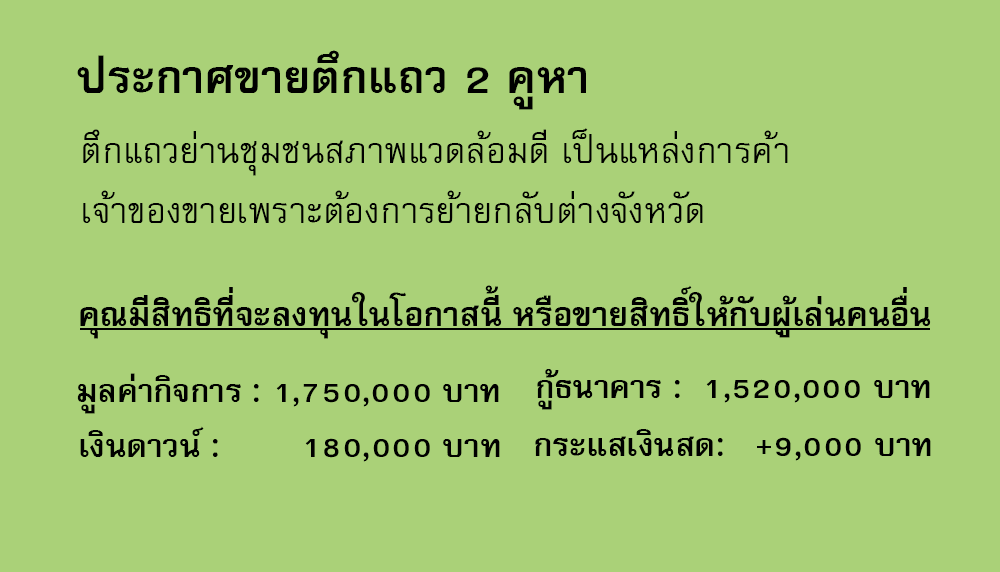
<style>
.page{position:relative;width:1000px;height:572px;background:#aad178}
.page>*{position:absolute;margin:0}
.t1{font:64px "FreesiaUPCBold";color:#000000}
.t2{font:50px/60px "FreesiaUPC";color:#000000}
.t3{font:47px "FreesiaUPCBold";color:#000000}
.t4{font:45px "FreesiaUPCBold";color:#000000}
</style>
<div class="page">
<p class="t1" style="left:77px;top:50px;width:509px;height:60px">ประกาศขายตึกแถว 2 คูหา</p>
<p class="t2" style="left:83px;top:128px;width:705px;height:95px">ตึกแถวย่านชุมชนสภาพแวดล้อมดี เป็นแหล่งการค้า <br>เจ้าของขายเพราะต้องการย้ายกลับต่างจังหวัด</p>
<p class="t3" style="left:80px;top:285px;width:851px;height:54px">คุณมีสิทธิที่จะลงทุนในโอกาสนี้ หรือขายสิทธิ์ให้กับผู้เล่นคนอื่น</p>
<p class="t4" style="left:77px;top:373px;width:422px;height:41px">มูลค่ากิจการ : 1,750,000 บาท</p>
<p class="t4" style="left:537px;top:369px;width:393px;height:41px">กู้ธนาคาร :  1,520,000 บาท</p>
<p class="t4" style="left:80px;top:426px;width:420px;height:36px">เงินดาวน์ :        180,000 บาท</p>
<p class="t4" style="left:535px;top:429px;width:396px;height:32px">กระแสเงินสด:   +9,000 บาท</p>
</div>
